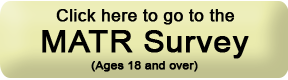
<style>
.page{position:relative;width:288px;height:80px}
.page>*{position:absolute;margin:0}
.t1{font:16px "ArialMT";color:#000000;font-weight:bold;scale:1.08 1}
.t2{font:30px "ArialMT";color:#000000;font-weight:bold;scale:1.08 1}
.t3{font:11px "ArialMT";color:#000000;font-weight:bold;scale:1.08 1}
</style>
<div class="page">
<p class="t1" style="left:56px;top:9px;width:179px;height:16px">Click here to go to the</p>
<p class="t2" style="left:42px;top:30px;width:207px;height:29px">MATR Survey</p>
<p class="t3" style="left:91px;top:61px;width:107px;height:11px">(Ages 18 and over)</p>
</div>
